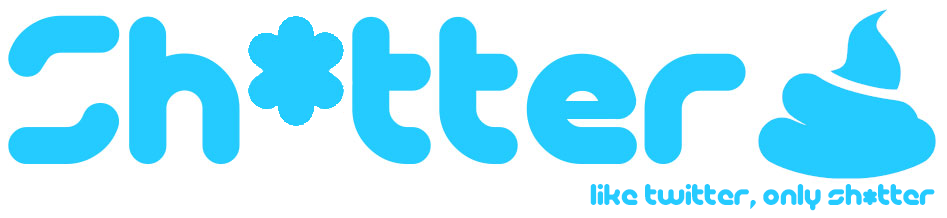
<style>
.page{position:relative;width:947px;height:218px;background:#ffffff}
.page>*{position:absolute;margin:0}
.t1{font:31px "PicoBlackAl";color:#25cbff}
</style>
<div class="page">
<p class="t1" style="left:590px;top:184px;width:345px;height:27px">Like Twitter, only sh*tter</p>
</div>
